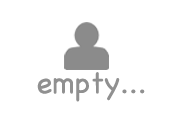
<style>
.page{position:relative;width:180px;height:130px;background:#ffffff}
.page>*{position:absolute;margin:0}
.t1{font:30px "Chalkboard";color:#909090}
</style>
<div class="page">
<p class="t1" style="left:37px;top:72px;width:108px;height:30px">empty...</p>
</div>
